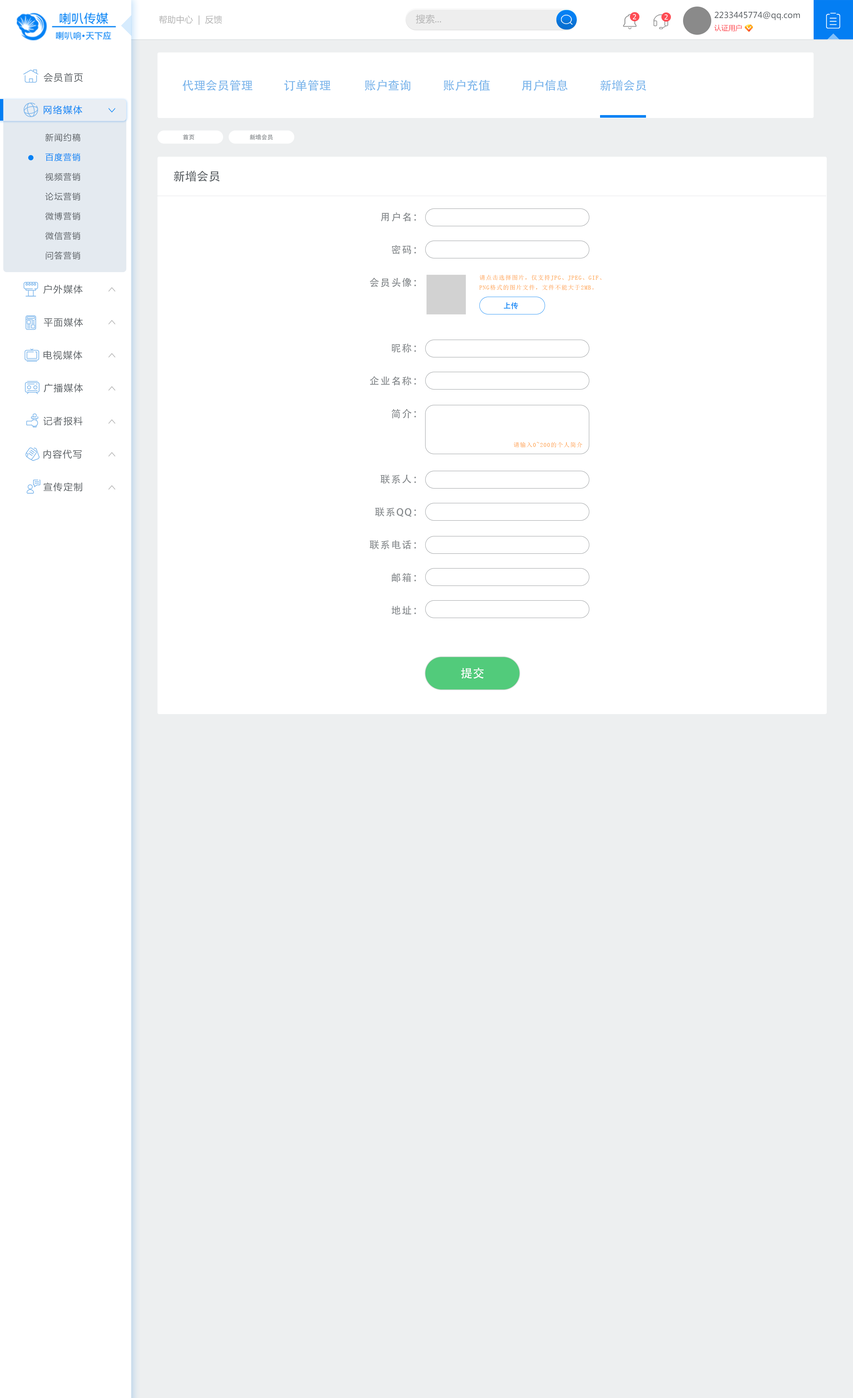
<style>
.page{position:relative;width:853px;height:1398px;background:#ffffff}
.page>*{position:absolute;margin:0}
.t1{font:8.6px "MicrosoftYaHei";color:#b4b4b4}
.t2{font:9.4px "MicrosoftYaHei";color:#b4b4b4}
.t3{font:6.9px "Tahoma";letter-spacing:0.1em;color:#ffffff;text-transform:uppercase}
.t4{font:8.2px/12.3px "MicrosoftYaHei";color:#5c6165}
.t5{font:7.1px/12.3px "MicrosoftYaHei";color:#fe4d55}
.t6{font:9.2px "MicrosoftYaHei";letter-spacing:0.1em;color:#5c6165}
.t7{font:11.8px "AdobeHeitiStd-Regular";color:#7db6eb}
.t8{font:9.2px "MicrosoftYaHei";letter-spacing:0.1em;color:#0582f5}
.t9{font:8.2px/19.7px "MicrosoftYaHei";letter-spacing:0.1em;color:#5c6165}
.t10{font:8.2px/19.7px "MicrosoftYaHei";letter-spacing:0.1em;color:#0381f5}
.t11{font:5.9px "AdobeHeitiStd-Regular";color:#878b8e}
.t12{font:11.8px "AdobeHeitiStd-Regular";color:#5c6165}
.t13{font:9.8px/32.8px "AdobeHeitiStd-Regular";letter-spacing:0.1em;color:#878b8e}
.t14{font:5.9px/9.8px "SimSun";letter-spacing:0.1em;color:#ff9b3a}
.t15{font:7.4px "AdobeHeitiStd-Regular";color:#0582f5}
.t16{font:5.9px "SimSun";letter-spacing:0.1em;color:#ff9b3a}
.t17{font:11.8px "AdobeHeitiStd-Regular";color:#fefefe}
</style>
<div class="page">
<p class="t1" style="left:159px;top:15px;width:63px;height:10px">帮助中心  |  反馈</p>
<p class="t2" style="left:416px;top:14px;width:25px;height:10px">搜索...</p>
<p class="t3" style="left:633px;top:14px;width:3px;height:5px">2</p>
<p class="t3" style="left:664px;top:14px;width:4px;height:6px">2</p>
<p class="t4" style="left:714px;top:11px;width:86px;height:20px">2233445774@qq.com<br><span class="t5">认证用户</span></p>
<p class="t6" style="left:44px;top:73px;width:39px;height:9px">会员首页</p>
<p class="t7" style="left:182px;top:80px;width:70px;height:11px">代理会员管理</p>
<p class="t7" style="left:284px;top:80px;width:46px;height:11px">订单管理</p>
<p class="t7" style="left:364px;top:80px;width:46px;height:11px">账户查询</p>
<p class="t7" style="left:443px;top:80px;width:47px;height:11px">账户充值</p>
<p class="t7" style="left:521px;top:80px;width:46px;height:11px">用户信息</p>
<p class="t7" style="left:600px;top:80px;width:46px;height:11px">新增会员</p>
<p class="t8" style="left:44px;top:105px;width:38px;height:9px">网络媒体</p>
<p class="t9" style="left:45px;top:133px;width:35px;height:127px">新闻约稿<br><span class="t10">百度营销<br></span>视频营销<br>论坛营销<br>微博营销<br>微信营销<br>问答营销</p>
<p class="t11" style="left:183px;top:134px;width:11px;height:6px">首页</p>
<p class="t11" style="left:250px;top:134px;width:23px;height:6px">新增会员</p>
<p class="t12" style="left:173px;top:171px;width:47px;height:11px">新增会员</p>
<p class="t13" style="left:370px;top:213px;width:46px;height:402px;text-align:right">用户名：<br>密码：<br>会员头像：<br><br>昵称：<br>企业名称：<br>简介：<br><br>联系人：<br>联系QQ：<br>联系电话：<br>邮箱：<br>地址：</p>
<p class="t14" style="left:479px;top:275px;width:122px;height:15px">请点击选择图片，仅支持JPG、JPEG、GIF、<br>PNG格式的图片文件，文件不能大于2MB。</p>
<p class="t6" style="left:43px;top:285px;width:40px;height:9px">户外媒体</p>
<p class="t15" style="left:503px;top:302px;width:15px;height:7px">上传</p>
<p class="t6" style="left:44px;top:318px;width:39px;height:9px">平面媒体</p>
<p class="t6" style="left:43px;top:351px;width:39px;height:9px">电视媒体</p>
<p class="t6" style="left:44px;top:383px;width:39px;height:10px">广播媒体</p>
<p class="t6" style="left:43px;top:417px;width:40px;height:9px">记者报料</p>
<p class="t6" style="left:43px;top:450px;width:39px;height:9px">内容代写</p>
<p class="t16" style="left:513px;top:442px;width:69px;height:6px">请输入0~200的个人简介</p>
<p class="t6" style="left:43px;top:482px;width:39px;height:10px">宣传定制</p>
<p class="t17" style="left:461px;top:668px;width:22px;height:11px">提交</p>
</div>
